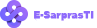
<style>
.page{position:relative;width:97px;height:28px;background:#ffffff}
.page>*{position:absolute;margin:0}
.t1{font:8.9px "Arial-Black";color:#8e6afb;font-weight:bold}
</style>
<div class="page">
<p class="t1" style="left:34px;top:11px;width:60px;height:10px">E-SarprasTI</p>
</div>
